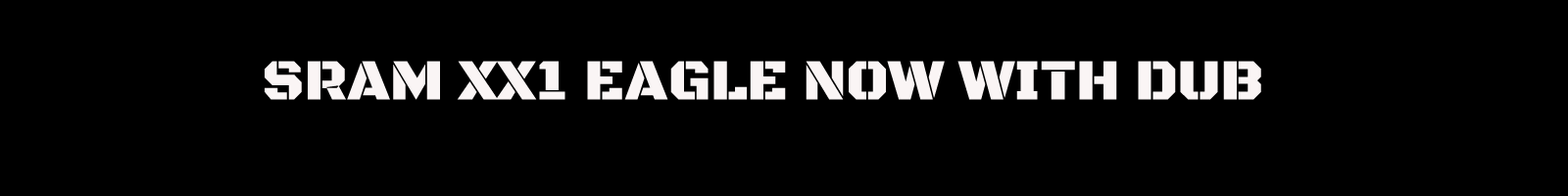
<style>
.page{position:relative;width:1568px;height:196px;background:#000000}
.page>*{position:absolute;margin:0}
.t1{font:58.8px "BlackOpsOne-Regular";color:#faf5f5}
</style>
<div class="page">
<p class="t1" style="left:265px;top:61px;width:996px;height:39px">SRAM XX1 EAGLE NOW WITH DUB</p>
</div>
